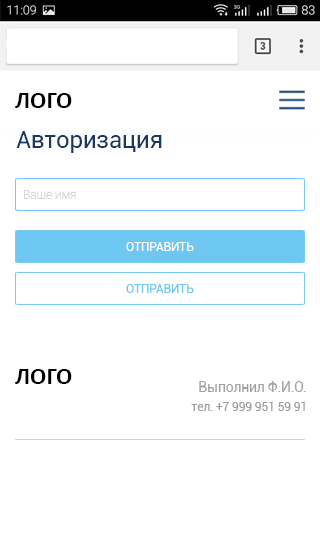
<style>
.page{position:relative;width:320px;height:533px;background:#ffffff}
.page>*{position:absolute;margin:0}
.t1{font:24px "Calibri-Bold";color:#000000}
.t2{font:24px "Roboto-Regular";letter-spacing:-0.01em;color:#1b3863}
.t3{font:12px "Roboto-Light";letter-spacing:-0.01em;color:#d2d4d6}
.t4{font:12px "Roboto-Regular";letter-spacing:-0.01em;color:#ffffff;text-transform:uppercase}
.t5{font:12px "Roboto-Regular";letter-spacing:-0.01em;color:#6dc7f1;text-transform:uppercase}
.t6{font:14px "Roboto-Regular";letter-spacing:-0.01em;color:#a2a1a0}
.t7{font:12px "Roboto-Regular";letter-spacing:-0.01em;color:#9e9d9d}
</style>
<div class="page">
<p class="t1" style="left:15px;top:93px;width:57px;height:15px">ЛОГО</p>
<p class="t2" style="left:16px;top:131px;width:146px;height:22px">Авторизация</p>
<p class="t3" style="left:24px;top:190px;width:52px;height:9px">Ваше имя</p>
<p class="t4" style="left:126px;top:242px;width:68px;height:9px">Отправить</p>
<p class="t5" style="left:126px;top:284px;width:68px;height:9px">Отправить</p>
<p class="t1" style="left:15px;top:369px;width:57px;height:15px">ЛОГО</p>
<p class="t6" style="left:199px;top:381px;width:107px;height:11px">Выполнил Ф.И.О.</p>
<p class="t7" style="left:191px;top:401px;width:114px;height:10px">тел. +7 999 951 59 91</p>
</div>
